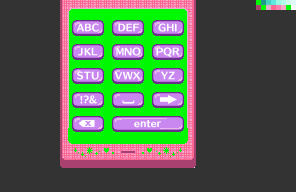
<style>
.page{position:relative;width:296px;height:192px;background:#333333}
.page>*{position:absolute;margin:0}
.t1{font:9px "HummingStd-E";letter-spacing:0.02em;color:#ffffff}
.t2{font:9px "HummingStd-E";letter-spacing:0.05em;color:#ffffff}
.t3{font:9px "HummingStd-E";letter-spacing:0.02em;color:#ffffff;scale:0.9 1}
.t4{font:11px "HummingStd-E";letter-spacing:0.05em;color:#ffffff}
.t5{font:9.3px "FranklinGothic-DemiCond";letter-spacing:0.02em;color:#c888f0;scale:1.61 1}
</style>
<div class="page">
<p class="t1" style="left:77px;top:23px;width:100px;height:9px">ABC  DEF      GHI</p>
<p class="t1" style="left:78px;top:47px;width:101px;height:10px"><span class="t2">JKL      </span><span class="t3">M</span>NO     PQR</p>
<p class="t2" style="left:77px;top:71px;width:98px;height:9px">STU    VWX      YZ</p>
<p class="t2" style="left:80px;top:95px;width:17px;height:9px">!?&amp;</p>
<p class="t4" style="left:122px;top:100px;width:13px;height:4px;rotate:-90deg">[</p>
<p class="t5" style="left:84px;top:121px;width:8px;height:5px">x</p>
<p class="t2" style="left:134px;top:120px;width:27px;height:8px">enter</p>
</div>
